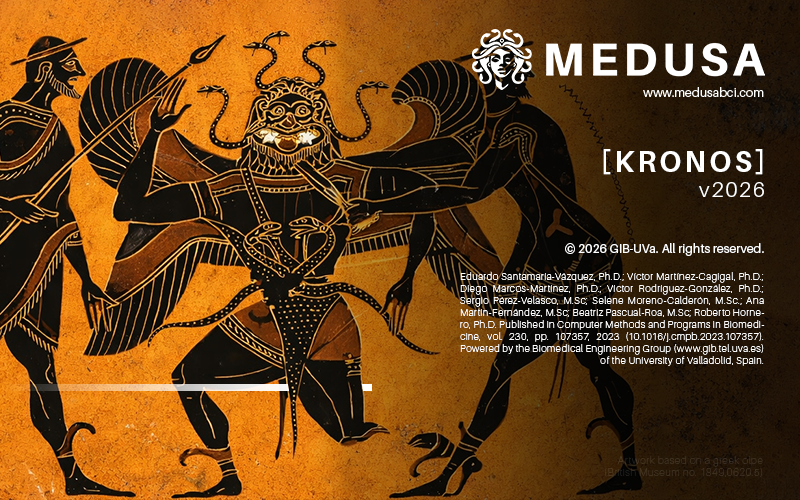
<style>
.page{position:relative;width:800px;height:500px}
.page>*{position:absolute;margin:0}
.t1{font:12.5px "Aileron-Regular";color:#ffffff}
.t2{font:29.2px "Aileron-Bold";letter-spacing:0.1em;color:#ffffff}
.t3{font:20.8px "Aileron-Light";letter-spacing:0.1em;color:#ffffff}
.t4{font:10px "Aileron-Thin";letter-spacing:0.05em;color:#ffffff}
.t5{font:10.4px "Aileron-Thin";letter-spacing:0.05em;color:#3b2e1f}
</style>
<div class="page">
<p class="t1" style="left:643px;top:87px;width:121px;height:10px">www.medusabci.com</p>
<p class="t2" style="left:603px;top:149px;width:161px;height:48px;text-align:right">[KRONOS]<br><span class="t3">v2026</span></p>
<p class="t4" style="left:460px;top:243px;width:305px;height:123px;text-align:justify"><span class="t1">© 2026 GIB-UVa. All rights reserved.<br><br></span>Eduardo Santamaría-Vázquez, Ph.D.; Víctor Martínez-Cagigal, Ph.D.; Diego Marcos-Martínez, Ph.D.; Víctor Rodríguez-González, Ph.D.; Sergio Pérez-Velasco, M.Sc; Selene Moreno-Calderón, M.Sc.; Ana Martín-Fernández, M.Sc; Beatriz Pascual-Roa, M.Sc; Roberto Hornero, Ph.D. Published in Computer Methods and Programs in Biomedicine, vol. 230, pp. 107357, 2023 (10.1016/j.cmpb.2023.107357). Powered by the Biomedical Engineering Group (www.gib.tel.uva.es) of the University of Valladolid, Spain.</p>
<p class="t5" style="left:604px;top:456px;width:159px;height:21px;text-align:right">Artwork based on a greek olpe <br>(British Museum no. 1849,0620.5)</p>
</div>
